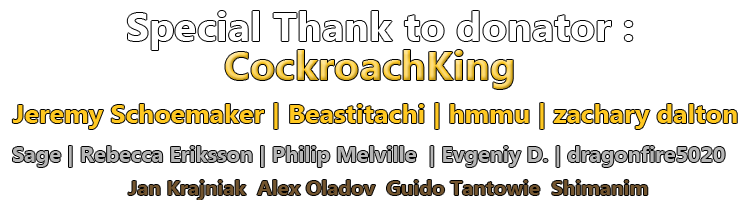
<style>
.page{position:relative;width:750px;height:200px;background:#ffffff}
.page>*{position:absolute;margin:0}
.t1{font:40px "LaoUI-Bold";scale:1.03 1}
.t2{font:26px "LaoUI-Bold";color:#ffc821;scale:1.03 1}
.t3{font:20px "LaoUI-Bold";color:#73552f;scale:1.03 1}
</style>
<div class="page">
<p class="t1" style="left:225px;top:50px;width:288px;height:39px">CockroachKing</p>
<p class="t2" style="left:12px;top:103px;width:725px;height:26px">Jeremy Schoemaker | Beastitachi | hmmu | zachary dalton</p>
<p class="t3" style="left:128px;top:180px;width:520px;height:20px">Jan Krajniak  Alex Oladov  Guido Tantowie  Shimanim</p>
</div>
